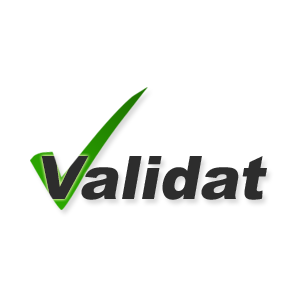
<style>
.page{position:relative;width:300px;height:300px;background:#ffffff}
.page>*{position:absolute;margin:0}
.t1{font:60px "Arial-Black";color:#2d2d2d;font-style:italic}
</style>
<div class="page">
<p class="t1" style="left:41px;top:156px;width:226px;height:44px">Validat</p>
<p class="t1" style="left:81px;top:156px;width:186px;height:44px">alidat</p>
</div>
